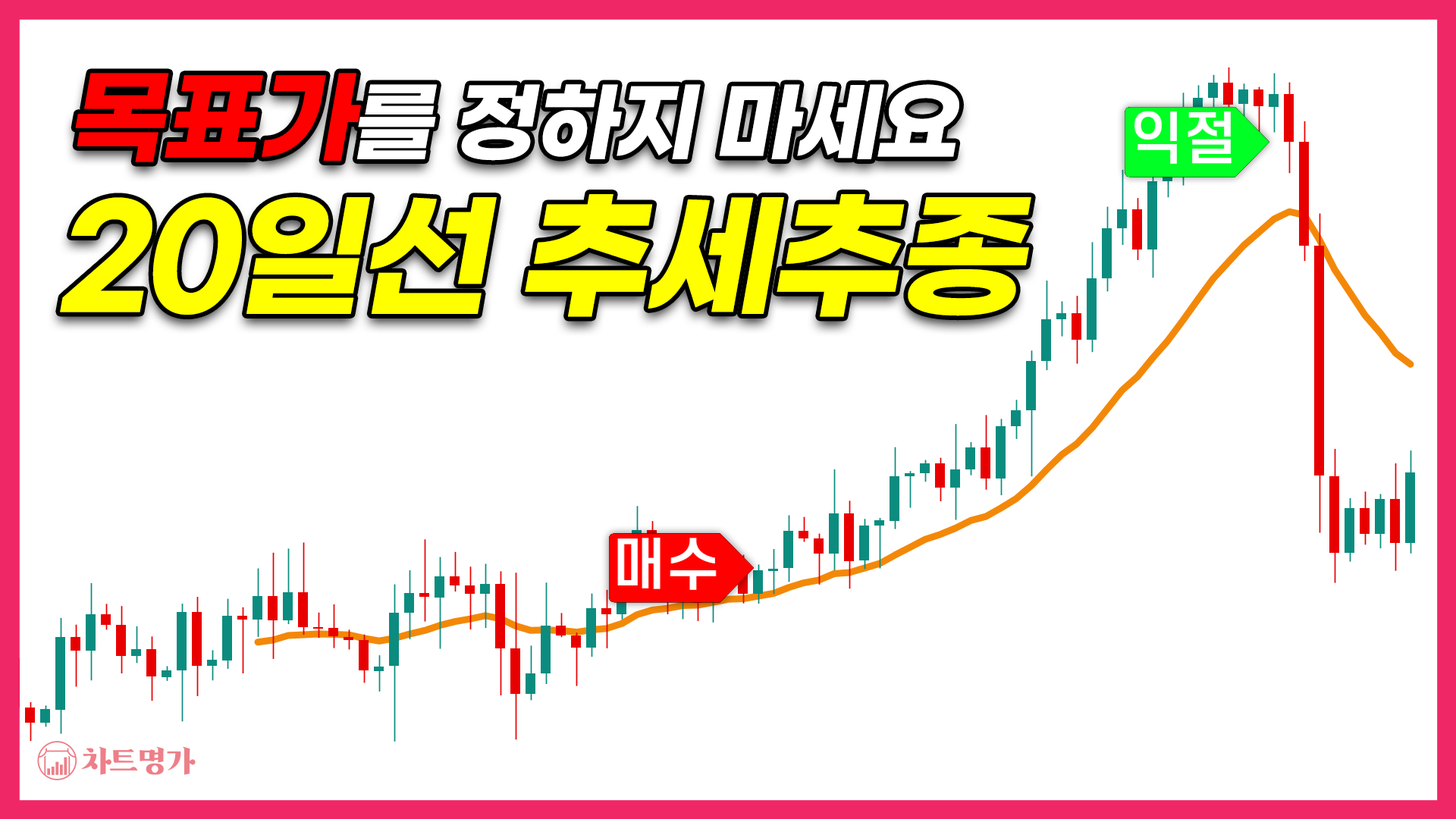
<style>
.page{position:relative;width:1456px;height:819px;background:#ffffff}
.page>*{position:absolute;margin:0}
.t1{font:87.3px "GmarketSansBold";letter-spacing:-0.04em;color:#ffffff;font-style:italic}
.t2{font:102.4px "GmarketSansBold";letter-spacing:-0.04em;color:#ff0000;font-style:italic}
.t3{font:136.6px "GmarketSansBold";letter-spacing:-0.04em;color:#ffff00;font-style:italic}
</style>
<div class="page">
<p class="t1" style="left:75px;top:73px;width:884px;height:89px"><span class="t2">목표가</span>를 정하지 마세요</p>
<p class="t3" style="left:60px;top:194px;width:971px;height:123px">20일선 추세추종</p>
</div>
